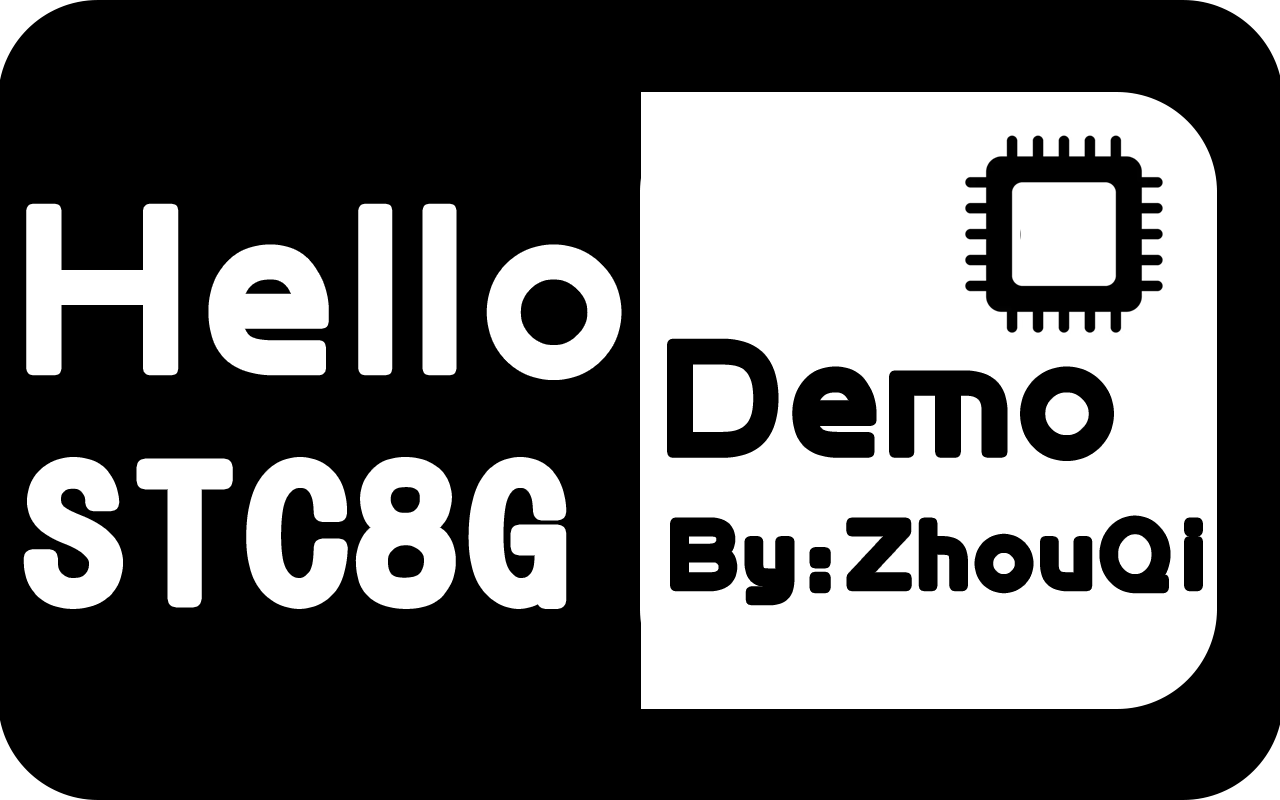
<style>
.page{position:relative;width:1280px;height:800px;background:#000000}
.page>*{position:absolute;margin:0}
.t1{font:243.1px "BDZYJT--GB1-0";letter-spacing:0.12em;color:#ffffff}
.t2{font:165.8px "BDZYJT--GB1-0";letter-spacing:0.06em;color:#000000;font-weight:bold}
.t3{font:198.6px "SimHei";letter-spacing:0.06em;color:#ffffff}
.t4{font:97.3px "BDZYJT--GB1-0";letter-spacing:0.12em;color:#000000}
</style>
<div class="page">
<p class="t1" style="left:32px;top:209px;width:584px;height:165px">Hello</p>
<p class="t2" style="left:672px;top:343px;width:437px;height:113px">Demo</p>
<p class="t3" style="left:31px;top:465px;width:528px;height:136px">STC8G</p>
<p class="t4" style="left:675px;top:520px;width:523px;height:81px">By:ZhouQi</p>
</div>
